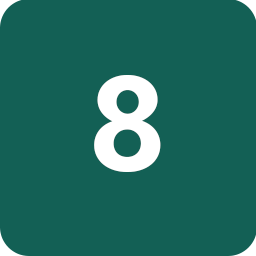
<style>
.page{position:relative;width:256px;height:256px;background:#136055}
.page>*{position:absolute;margin:0}
.t1{font:133.3px "LeelawadeeUI-Bold";color:#ffffff}
</style>
<div class="page">
<p class="t1" style="left:94px;top:75px;width:67px;height:97px">8</p>
</div>
